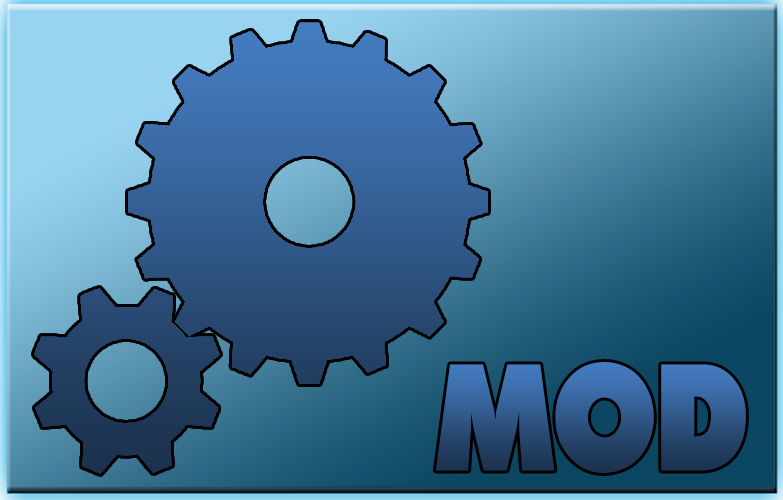
<style>
.page{position:relative;width:783px;height:500px}
.page>*{position:absolute;margin:0}
.t1{font:146.9px "OpineHeavy";scale:0.84 1}
</style>
<div class="page">
<p class="t1" style="left:435px;top:362px;width:311px;height:111px">MOD</p>
</div>
